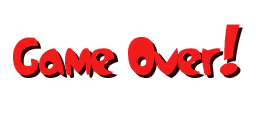
<style>
.page{position:relative;width:256px;height:128px;background:#ffffff}
.page>*{position:absolute;margin:0}
.t1{font:53.7px "Samba";color:#f21c1c}
.t2{font:53.7px "Samba"}
</style>
<div class="page">
<p class="t1" style="left:13px;top:24px;width:227px;height:51px">Game Over!</p>
<p class="t2" style="left:16px;top:27px;width:227px;height:51px">Game Over!</p>
</div>
